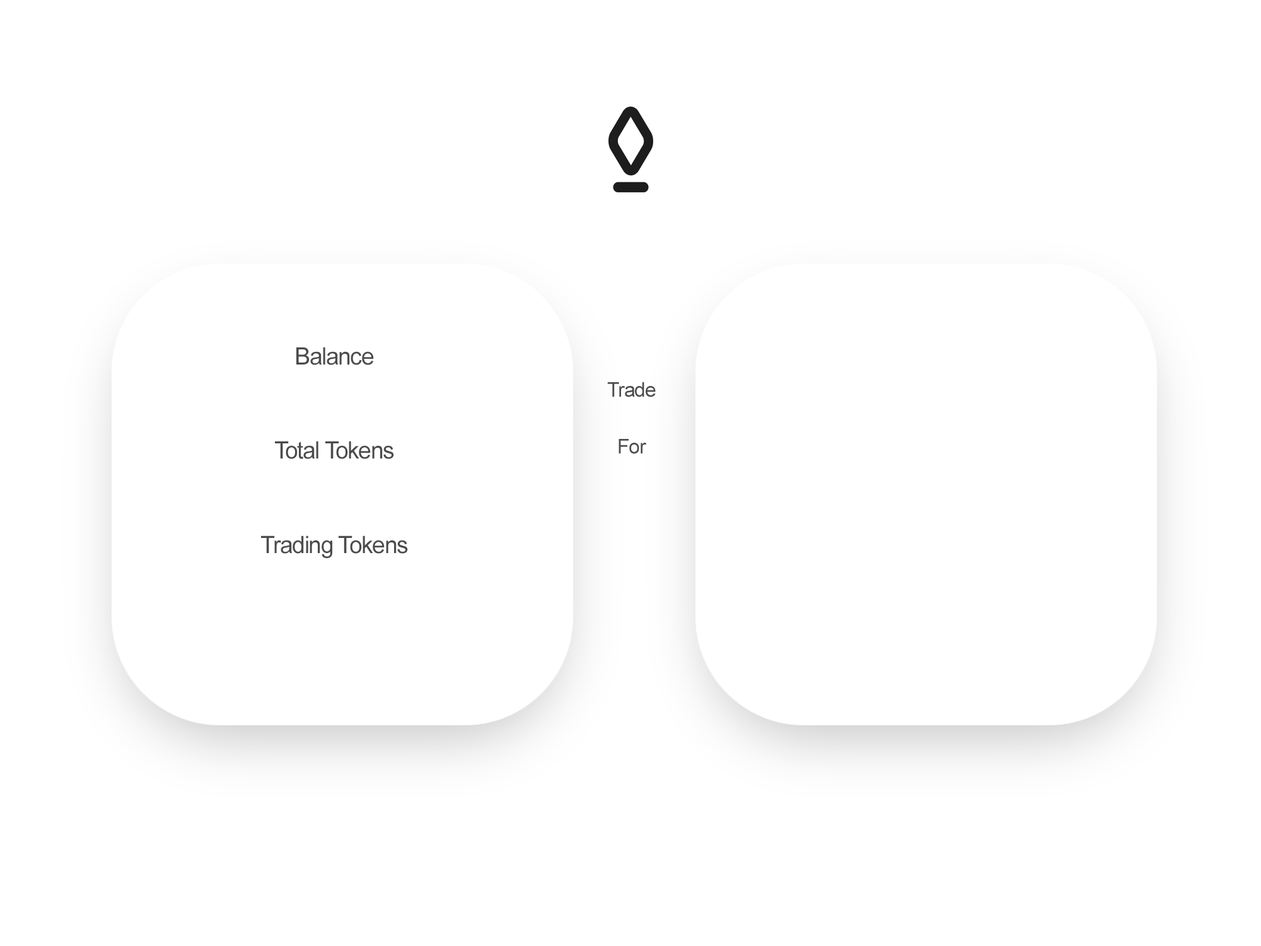
<style>
.page{position:relative;width:1261px;height:946px;background:#ffffff}
.page>*{position:absolute;margin:0}
.t1{font:24px/31.5px "ArialMT";letter-spacing:-0.04em;color:#4b4b4b}
.t2{font:20.2px/56.7px "ArialMT";letter-spacing:-0.04em;color:#4b4b4b}
</style>
<div class="page">
<p class="t1" style="left:261px;top:347px;width:147px;height:211px;text-align:center">Balance<br><br><br>Total Tokens<br><br><br>Trading Tokens</p>
<p class="t2" style="left:607px;top:382px;width:49px;height:72px;text-align:center">Trade<br>For</p>
</div>
